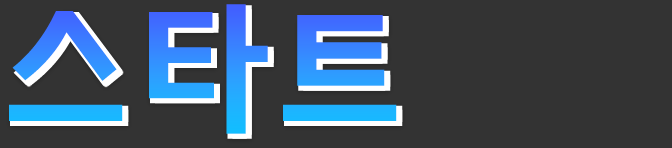
<style>
.page{position:relative;width:672px;height:148px;background:#333333}
.page>*{position:absolute;margin:0}
.t1{font:146.7px "KBIZgoH";letter-spacing:0.05em;text-transform:uppercase}
</style>
<div class="page">
<p class="t1" style="left:9px;top:4px;width:388px;height:130px">스타트</p>
</div>
